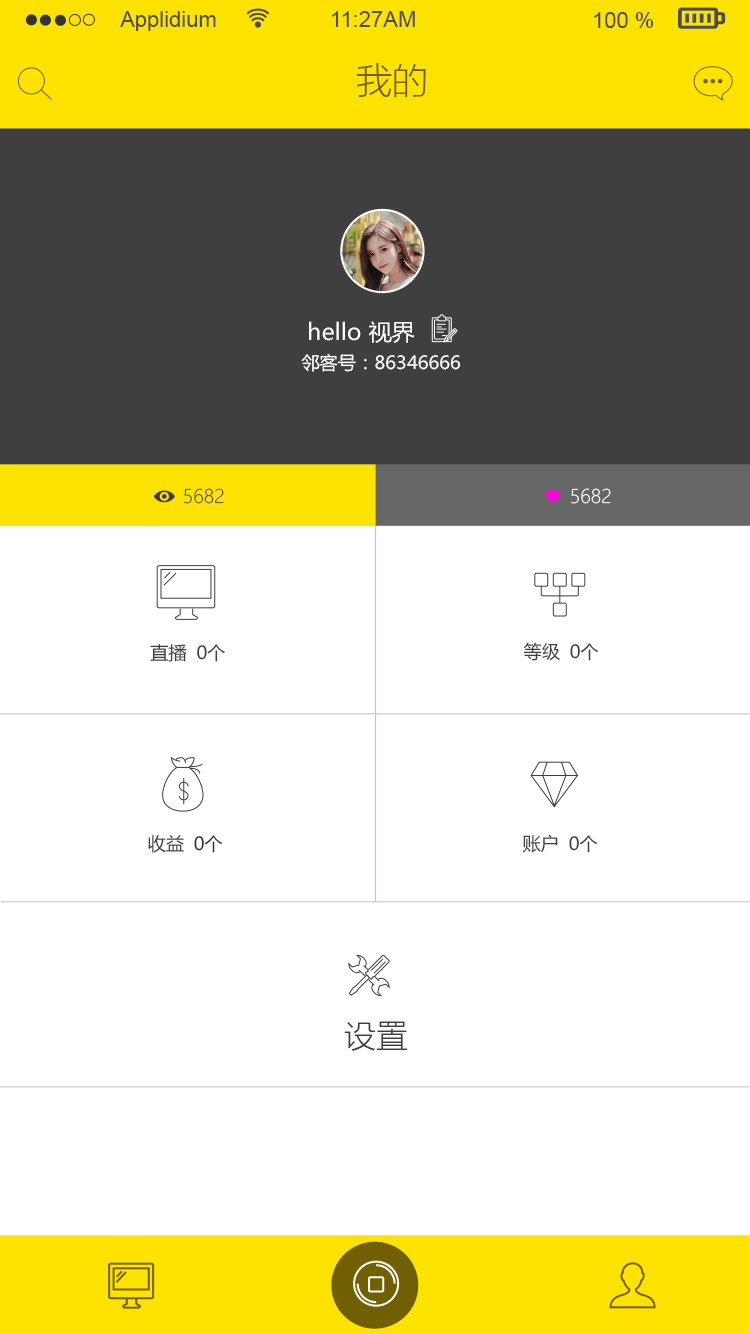
<style>
.page{position:relative;width:750px;height:1334px;background:#ffffff}
.page>*{position:absolute;margin:0}
.t1{font:22px "ArialMT";color:#4d4d4d}
.t2{font:36px "MicrosoftYaHeiLight";color:#706003}
.t3{font:22.7px "MicrosoftYaHei";color:#ffffff}
.t4{font:18px "MicrosoftYaHei";color:#ffffff}
.t5{font:18.6px "MicrosoftYaHeiLight";color:#3f3f3f}
.t6{font:18.6px "MicrosoftYaHeiLight";color:#ffffff}
.t7{font:18px "MicrosoftYaHei";color:#3f3f3f}
.t8{font:18px "MicrosoftYaHei";color:#333333}
.t9{font:32px "MicrosoftYaHeiLight";color:#3f3f3f}
</style>
<div class="page">
<p class="t1" style="left:120px;top:11px;width:96px;height:20px">Applidium</p>
<p class="t1" style="left:332px;top:11px;width:83px;height:16px">11:27AM</p>
<p class="t1" style="left:594px;top:12px;width:60px;height:16px">100 %</p>
<p class="t2" style="left:356px;top:63px;width:70px;height:34px">我的</p>
<p class="t3" style="left:309px;top:321px;width:106px;height:22px">hello 视界</p>
<p class="t4" style="left:301px;top:353px;width:160px;height:19px">邻客号：86346666</p>
<p class="t5" style="left:184px;top:488px;width:40px;height:16px">5682</p>
<p class="t6" style="left:571px;top:488px;width:40px;height:16px">5682</p>
<p class="t7" style="left:150px;top:644px;width:37px;height:18px">直播</p>
<p class="t7" style="left:197px;top:644px;width:28px;height:18px">0个</p>
<p class="t7" style="left:523px;top:642px;width:37px;height:19px">等级</p>
<p class="t7" style="left:570px;top:643px;width:29px;height:18px">0个</p>
<p class="t7" style="left:148px;top:835px;width:36px;height:18px">收益</p>
<p class="t8" style="left:194px;top:835px;width:29px;height:18px">0个</p>
<p class="t7" style="left:522px;top:834px;width:36px;height:19px">账户</p>
<p class="t7" style="left:569px;top:835px;width:29px;height:18px">0个</p>
<p class="t9" style="left:344px;top:1021px;width:64px;height:30px">设置</p>
</div>
